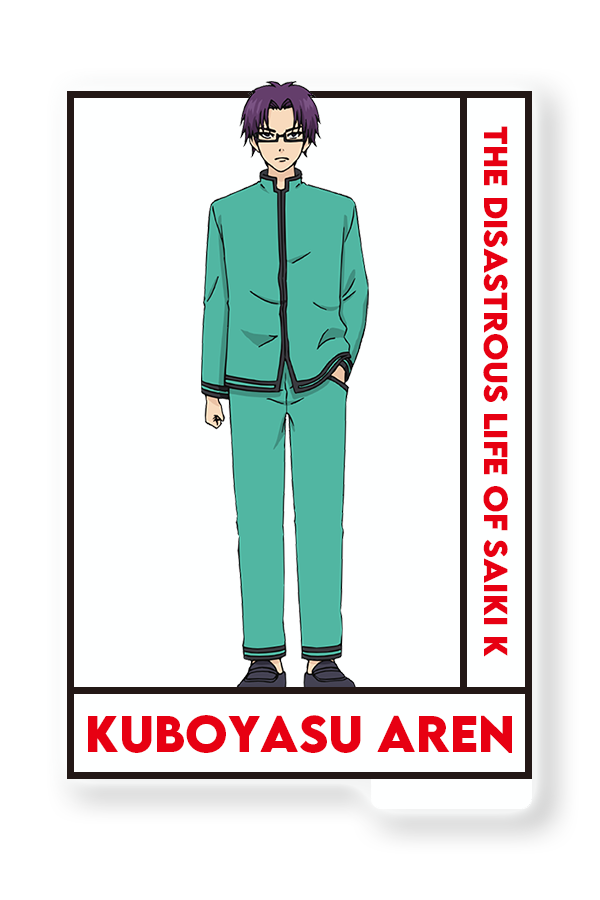
<style>
.page{position:relative;width:600px;height:900px;background:#feffff}
.page>*{position:absolute;margin:0}
.t1{font:29.6px "LEMONMILK-Bold";color:#e70012}
.t2{font:45.6px "LEMONMILK-Bold";color:#e70012}
</style>
<div class="page">
<p class="t1" style="left:483px;top:126px;width:25px;height:531px;rotate:90deg">THE disastrous Life of saiki K</p>
<p class="t2" style="left:88px;top:715px;width:424px;height:38px">Kuboyasu Aren</p>
</div>
